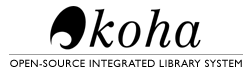
<style>
.page{position:relative;width:250px;height:74px;background:#ffffff}
.page>*{position:absolute;margin:0}
.t1{font:10.4px "GillSansMT";letter-spacing:0.05em;color:#000000}
</style>
<div class="page">
<p class="t1" style="left:10px;top:59px;width:232px;height:8px">OPEN-SOURCE INTEGRATED LIBRARY SYSTEM</p>
</div>
